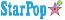
<style>
.page{position:relative;width:65px;height:20px;background:#ffffff}
.page>*{position:absolute;margin:0}
.t1{font:17.1px "Cairo";letter-spacing:-0.01em;color:#25a0d9;font-weight:bold;scale:0.73 1}
.t2{font:17.1px "Cairo";letter-spacing:-0.05em;color:#25a0d9;font-weight:bold;scale:0.73 1}
.t3{font:17.1px "Cairo";letter-spacing:-0.025em;color:#25a0d9;font-weight:bold;scale:0.73 1}
.t4{font:17.1px "Cairo";letter-spacing:-0.1em;color:#25a0d9;font-weight:bold;scale:0.73 1}
.t5{font:17.1px "Cairo";color:#25a0d9;font-weight:bold;scale:0.73 1}
</style>
<div class="page">
<p class="t1" style="left:0px;top:0px;width:47px;height:20px"><span class="t2">S</span>ta<span class="t3">r</span><span class="t4">P</span><span class="t3">o</span><span class="t5">p</span></p>
</div>
